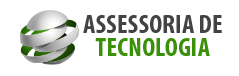
<style>
.page{position:relative;width:239px;height:76px;background:#ffffff}
.page>*{position:absolute;margin:0}
.t1{font:26.3px/23px "MyriadPro-BoldCond";color:#434343;scale:1.04 1}
.t2{font:26.3px/23px "MyriadPro-BoldCond";color:#3b900a;scale:1.04 1}
</style>
<div class="page">
<p class="t1" style="left:83px;top:15px;width:139px;height:41px;text-align:center">ASSESSORIA DE<br><span class="t2">TECNOLOGIA</span></p>
</div>
